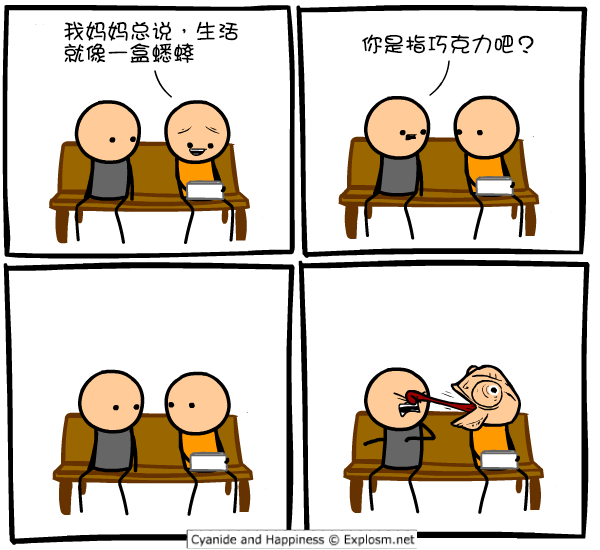
<style>
.page{position:relative;width:600px;height:550px;background:#ffffff}
.page>*{position:absolute;margin:0}
.t1{font:22px/22px "DFGirl";color:#000000}
.t2{font:22px "DFGirl";color:#000000}
</style>
<div class="page">
<p class="t1" style="left:64px;top:21px;width:174px;height:42px">我妈妈总说，生活<br>就像一盒蟋蟀</p>
<p class="t2" style="left:362px;top:34px;width:172px;height:20px">你是指巧克力吧？</p>
</div>
